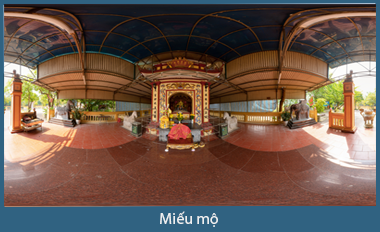
<style>
.page{position:relative;width:380px;height:232px}
.page>*{position:absolute;margin:0}
.t1{font:16px "MyriadPro-Regular";color:#edeff0}
</style>
<div class="page">
<p class="t1" style="left:160px;top:211px;width:58px;height:16px">Miếu mộ</p>
</div>
